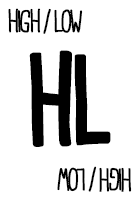
<style>
.page{position:relative;width:140px;height:200px;background:#ffffff}
.page>*{position:absolute;margin:0}
.t1{font:28.7px "CardenioModern-Reg";letter-spacing:-0.1em;color:#000000;text-transform:uppercase;font-weight:bold;scale:0.87 1}
.t2{font:115px "CardenioModern-Bold";letter-spacing:-0.1em;color:#000000;text-transform:uppercase;font-weight:bold;scale:0.87 1}
</style>
<div class="page">
<p class="t1" style="left:8px;top:8px;width:75px;height:26px">HIGH / LOW</p>
<p class="t2" style="left:29px;top:50px;width:82px;height:97px">HL</p>
<p class="t1" style="left:57px;top:166px;width:75px;height:26px;rotate:180deg">HIGH / LOW</p>
</div>
